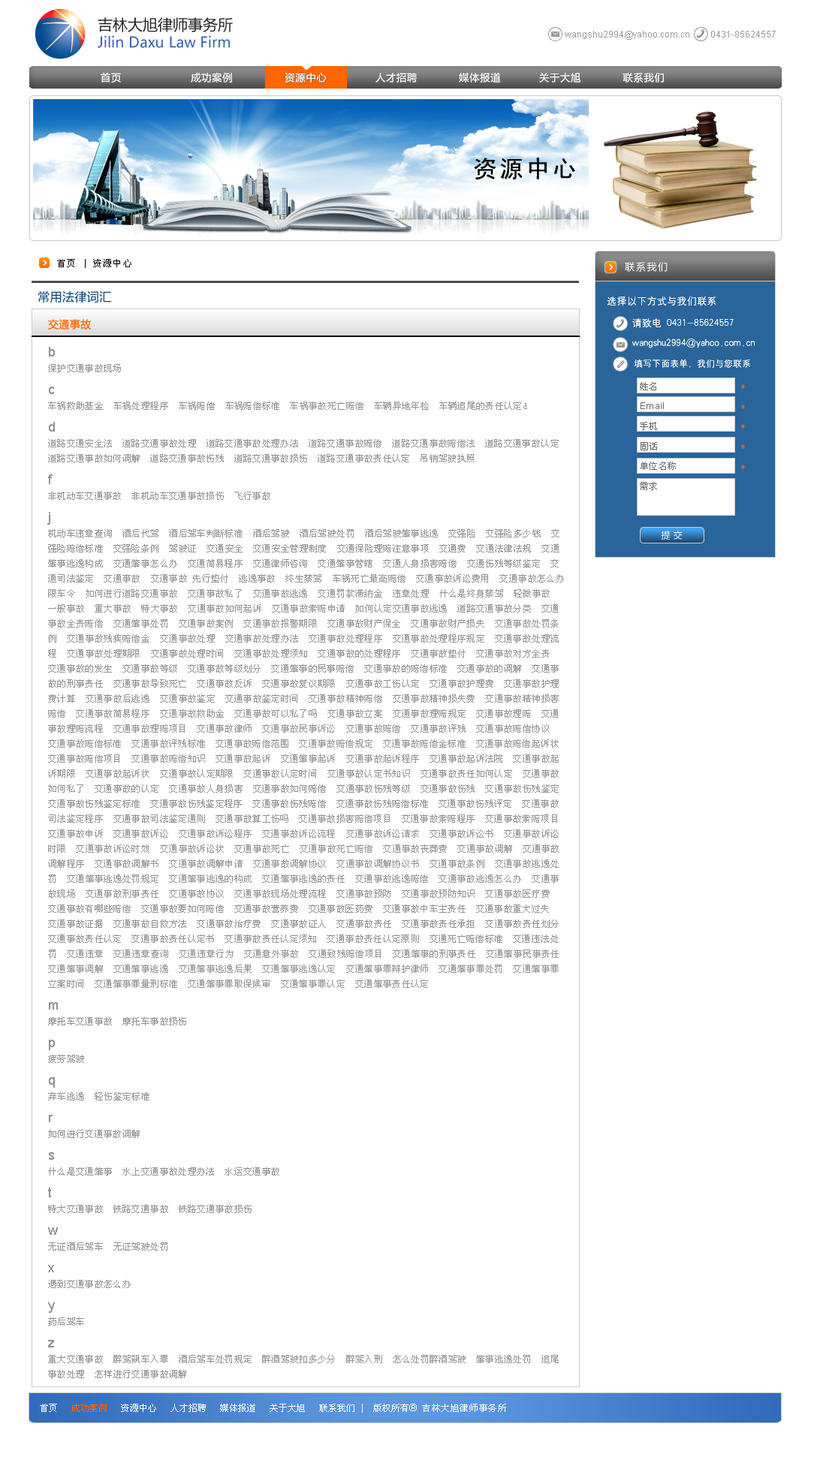
<style>
.page{position:relative;width:814px;height:1466px;background:#ffffff}
.page>*{position:absolute;margin:0}
.t1{font:14.6px "MicrosoftYaHei";color:#3562ae}
.t2{font:15px "MicrosoftYaHei";color:#231f20}
.t3{font:9px "ArialMT";color:#989898}
.t4{font:10px "MicrosoftYaHei";letter-spacing:0.05em;color:#fffefe}
.t5{font:24px "SimHei";letter-spacing:0.1em;color:#000000}
.t6{font:9px "SimSun";letter-spacing:0.1em;color:#000000}
.t7{font:10px "MicrosoftYaHei";letter-spacing:0.1em;color:#ffffff}
.t8{font:12px "MicrosoftYaHei";letter-spacing:0.029em;color:#004378}
.t9{font:10px/22px "HYg2gj";color:#ffffff}
.t10{font:10px/20px "HYg2gj";color:#ffffff}
.t11{font:9px/20px "HYg2gj";color:#ffffff}
.t12{font:10.5px "MicrosoftYaHei";letter-spacing:0.029em;color:#ff6600}
.t13{font:9px/15px "SimSun";letter-spacing:0.029em;color:#909090}
.t14{font:13.5px/22.5px "ArialMT";letter-spacing:0.029em;color:#909090}
.t15{font:9px/20px "SimSun";letter-spacing:0.029em;color:#666666}
.t16{font:9px/20px "ArialMT";letter-spacing:0.029em;color:#666666}
.t17{font:9px/20px "SimSun";letter-spacing:0.029em;color:#ff6500}
.t18{font:9px "MicrosoftYaHei";letter-spacing:0.029em;color:#ffffff}
.t19{font:9px "SimSun";color:#ffffff}
.t20{font:9px "SimSun";color:#ff6500}
.t21{font:10px "ArialMT";color:#ffffff}
.t22{font:9px "SimSun";letter-spacing:0.05em;color:#ffffff}
</style>
<div class="page">
<p class="t1" style="left:98px;top:17px;width:135px;height:31px"><span class="t2">吉林大旭律师事务所<br></span>Jilin Daxu Law Firm</p>
<p class="t3" style="left:564px;top:31px;width:211px;height:9px">wangshu2994@yahoo.com.cn         0431-85624557</p>
<p class="t4" style="left:101px;top:72px;width:562px;height:11px">首页                    成功案例               资源中心              人才招聘            媒体报道           关于大旭            联系我们</p>
<p class="t4" style="left:101px;top:72px;width:562px;height:11px">首页                    成功案例               资源中心              人才招聘            媒体报道           关于大旭            联系我们</p>
<p class="t5" style="left:474px;top:158px;width:101px;height:22px">资源中心</p>
<p class="t6" style="left:57px;top:259px;width:74px;height:9px">首页 | 资源中心</p>
<p class="t7" style="left:624px;top:262px;width:43px;height:10px">联系我们</p>
<p class="t7" style="left:624px;top:262px;width:43px;height:10px">联系我们</p>
<p class="t8" style="left:38px;top:290px;width:73px;height:13px">常用法律词汇</p>
<p class="t9" style="left:606px;top:296px;width:148px;height:72px">选择以下方式与我们联系<br>     请致电 0431-85624557<br><span class="t10">     wangshu2994@yahoo.com.cn<br></span><span class="t11">      填写下面表单，我们与您联系</span></p>
<p class="t9" style="left:606px;top:296px;width:148px;height:72px">选择以下方式与我们联系<br>     请致电 0431-85624557<br><span class="t10">     wangshu2994@yahoo.com.cn<br></span><span class="t11">      填写下面表单，我们与您联系</span></p>
<p class="t12" style="left:48px;top:319px;width:44px;height:10px">交通事故</p>
<p class="t13" style="left:47px;top:347px;width:517px;height:1031px"><span class="t14">b<br></span>保护交通事故现场<br><span class="t14">c<br></span>车祸救助基金  车祸处理程序  车祸赔偿  车祸赔偿标准  车祸事故死亡赔偿  车辆异地年检  车辆追尾的责任认定d<br><span class="t14">d<br></span>道路交通安全法  道路交通事故处理  道路交通事故处理办法  道路交通事故赔偿  道路交通事故赔偿法  道路交通事故认定  道路交通事故如何调解  道路交通事故伤残  道路交通事故损伤  道路交通事故责任认定  吊销驾驶执照<br><span class="t14">f<br></span>非机动车交通事故  非机动车交通事故损伤  飞行事故<br><span class="t14">j<br></span>机动车违章查询  酒后代驾  酒后驾车判断标准  酒后驾驶  酒后驾驶处罚  酒后驾驶肇事逃逸  交强险  交强险多少钱  交强险赔偿标准  交强险条例  驾驶证  交通安全  交通安全管理制度  交通保险理赔注意事项  交通费  交通法律法规  交通肇事逃逸构成  交通肇事怎么办  交通简易程序  交通律师咨询  交通肇事管辖  交通人身损害赔偿  交通伤残等级鉴定  交通司法鉴定  交通事故  交通事故 先行垫付  逃逸事故  终生禁驾  车祸死亡最高赔偿  交通事故诉讼费用  交通事故怎么办  限车令  如何进行道路交通事故  交通事故私了  交通事故逃逸  交通罚款滞纳金  违章处理  什么是终身禁驾  轻微事故  一般事故  重大事故  特大事故  交通事故如何起诉  交通事故索赔申请  如何认定交通事故逃逸  道路交通事故分类  交通事故全责赔偿  交通肇事处罚  交通事故案例  交通事故报警期限  交通事故财产保全  交通事故财产损失  交通事故处罚条例  交通事故残疾赔偿金  交通事故处理  交通事故处理办法  交通事故处理程序  交通事故处理程序规定  交通事故处理流程  交通事故处理期限  交通事故处理时间  交通事故处理须知  交通事故的处理程序  交通事故垫付  交通事故对方全责  交通事故的发生  交通事故等级  交通事故等级划分  交通肇事的民事赔偿  交通事故的赔偿标准  交通事故的调解  交通事故的刑事责任  交通事故导致死亡  交通事故反诉  交通事故复议期限  交通事故工伤认定  交通事故护理费  交通事故护理费计算  交通事故后逃逸  交通事故鉴定  交通事故鉴定时间  交通事故精神赔偿  交通事故精神损失费  交通事故精神损害赔偿  交通事故简易程序  交通事故救助金  交通事故可以私了吗  交通事故立案  交通事故理赔规定  交通事故理赔  交通事故理赔流程  交通事故理赔项目  交通事故律师  交通事故民事诉讼  交通事故赔偿  交通事故评残  交通事故赔偿协议  交通事故赔偿标准  交通事故评残标准  交通事故赔偿范围  交通事故赔偿规定  交通事故赔偿金标准  交通事故赔偿起诉状  交通事故赔偿项目  交通事故赔偿知识  交通事故起诉  交通肇事起诉  交通事故起诉程序  交通事故起诉法院  交通事故起诉期限  交通事故起诉状  交通事故认定期限  交通事故认定时间  交通事故认定书知识  交通事故责任如何认定  交通事故如何私了  交通事故的认定  交通事故人身损害  交通事故如何赔偿  交通事故伤残等级  交通事故伤残  交通事故伤残鉴定  交通事故伤残鉴定标准  交通事故伤残鉴定程序  交通事故伤残赔偿  交通事故伤残赔偿标准  交通事故伤残评定  交通事故司法鉴定程序  交通事故司法鉴定通则  交通事故算工伤吗  交通事故损害赔偿项目  交通事故索赔程序  交通事故索赔项目  交通事故申诉  交通事故诉讼  交通事故诉讼程序  交通事故诉讼流程  交通事故诉讼请求  交通事故诉讼书  交通事故诉讼时限  交通事故诉讼时效  交通事故诉讼状  交通事故死亡  交通事故死亡赔偿  交通事故丧葬费  交通事故调解  交通事故调解程序  交通事故调解书  交通事故调解申请  交通事故调解协议  交通事故调解协议书  交通事故条例  交通事故逃逸处罚  交通肇事逃逸处罚规定  交通肇事逃逸的构成  交通肇事逃逸的责任  交通事故逃逸赔偿  交通事故逃逸怎么办  交通事故现场  交通事故刑事责任  交通事故协议  交通事故现场处理流程  交通事故预防  交通事故预防知识  交通事故医疗费  交通事故有哪些赔偿  交通事故要如何赔偿  交通事故营养费  交通事故医药费  交通事故中车主责任  交通事故重大过失  交通事故证据  交通事故自救方法  交通事故治疗费  交通事故证人  交通事故责任  交通事故责任承担  交通事故责任划分  交通事故责任认定  交通事故责任认定书  交通事故责任认定须知  交通事故责任认定原则  交通死亡赔偿标准  交通违法处罚  交通违章  交通违章查询  交通违章行为  交通意外事故  交通致残赔偿项目  交通肇事的刑事责任  交通肇事民事责任  交通肇事调解  交通肇事逃逸  交通肇事逃逸后果  交通肇事逃逸认定  交通肇事罪辩护律师  交通肇事罪处罚  交通肇事罪立案时间  交通肇事罪量刑标准  交通肇事罪取保候审  交通肇事罪认定  交通肇事责任认定<br><span class="t14">m<br></span>摩托车交通事故  摩托车事故损伤<br><span class="t14">p<br></span>疲劳驾驶<br><span class="t14">q<br></span>弃车逃逸  轻伤鉴定标准<br><span class="t14">r<br></span>如何进行交通事故调解<br><span class="t14">s<br></span>什么是交通肇事  水上交通事故处理办法  水运交通事故<br><span class="t14">t<br></span>特大交通事故  铁路交通事故  铁路交通事故损伤<br><span class="t14">w<br></span>无证酒后驾车  无证驾驶处罚<br><span class="t14">x<br></span>遇到交通事故怎么办<br><span class="t14">y<br></span>药后驾车<br><span class="t14">z<br></span>重大交通事故  醉驾飙车入罪  酒后驾车处罚规定  醉酒驾驶扣多少分  醉驾入刑  怎么处罚醉酒驾驶  肇事逃逸处罚  追尾事故处理  怎样进行交通事故调解</p>
<p class="t15" style="left:639px;top:382px;width:36px;height:108px">姓名<br><span class="t16">Email<br></span>手机<br>固话<br>单位名称<br>需求</p>
<p class="t17" style="left:741px;top:384px;width:3px;height:85px">*<br>*<br>*<br>*<br>*</p>
<p class="t18" style="left:660px;top:531px;width:22px;height:9px">提 交</p>
<p class="t19" style="left:40px;top:1403px;width:466px;height:9px">首页   <span class="t20">成功案例 </span>  资源中心   人才招聘   媒体报道   关于大旭   联系我们 |  版权所有<span class="t21">® </span><span class="t22">吉林大旭律师事务所</span></p>
</div>
